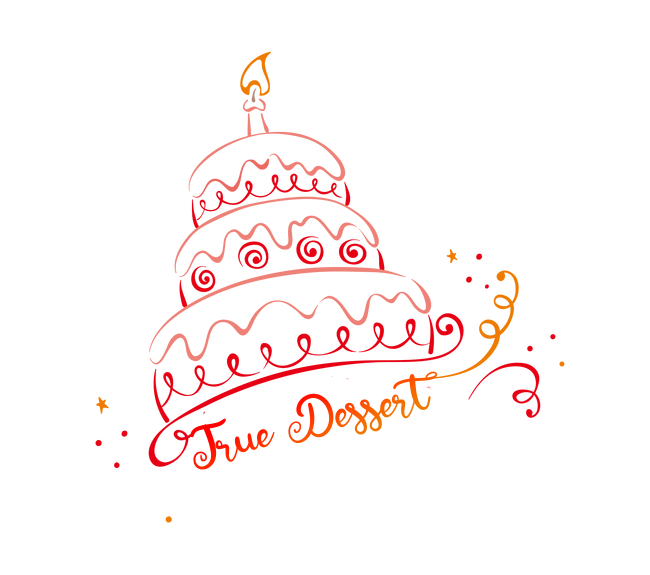
<style>
.page{position:relative;width:650px;height:575px;background:#ffffff}
.page>*{position:absolute;margin:0}
.t1{font:54.3px "BabyBunnyScript";letter-spacing:-0.01em}
</style>
<div class="page">
<p class="t1" style="left:190px;top:371px;width:248px;height:99px;rotate:-14deg">True Dessert</p>
</div>
